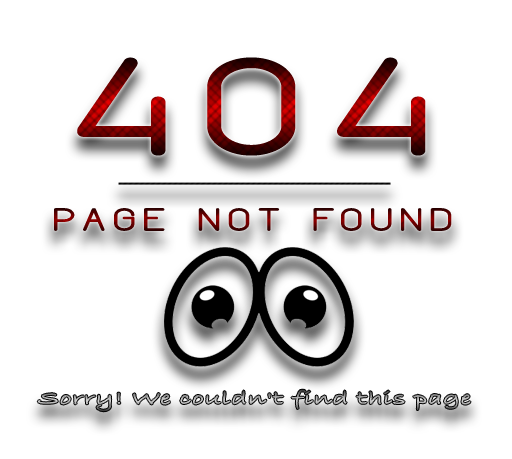
<style>
.page{position:relative;width:512px;height:459px;background:#ffffff}
.page>*{position:absolute;margin:0}
.t1{font:133.1px "Quest";font-weight:bold;scale:1.54 1}
.t2{font:30.7px "Quest";font-weight:bold;scale:1.54 1}
</style>
<div class="page">
<p class="t1" style="left:77px;top:57px;width:349px;height:99px">404</p>
<p class="t2" style="left:54px;top:208px;width:398px;height:23px">PAGE NOT FOuND</p>
</div>
